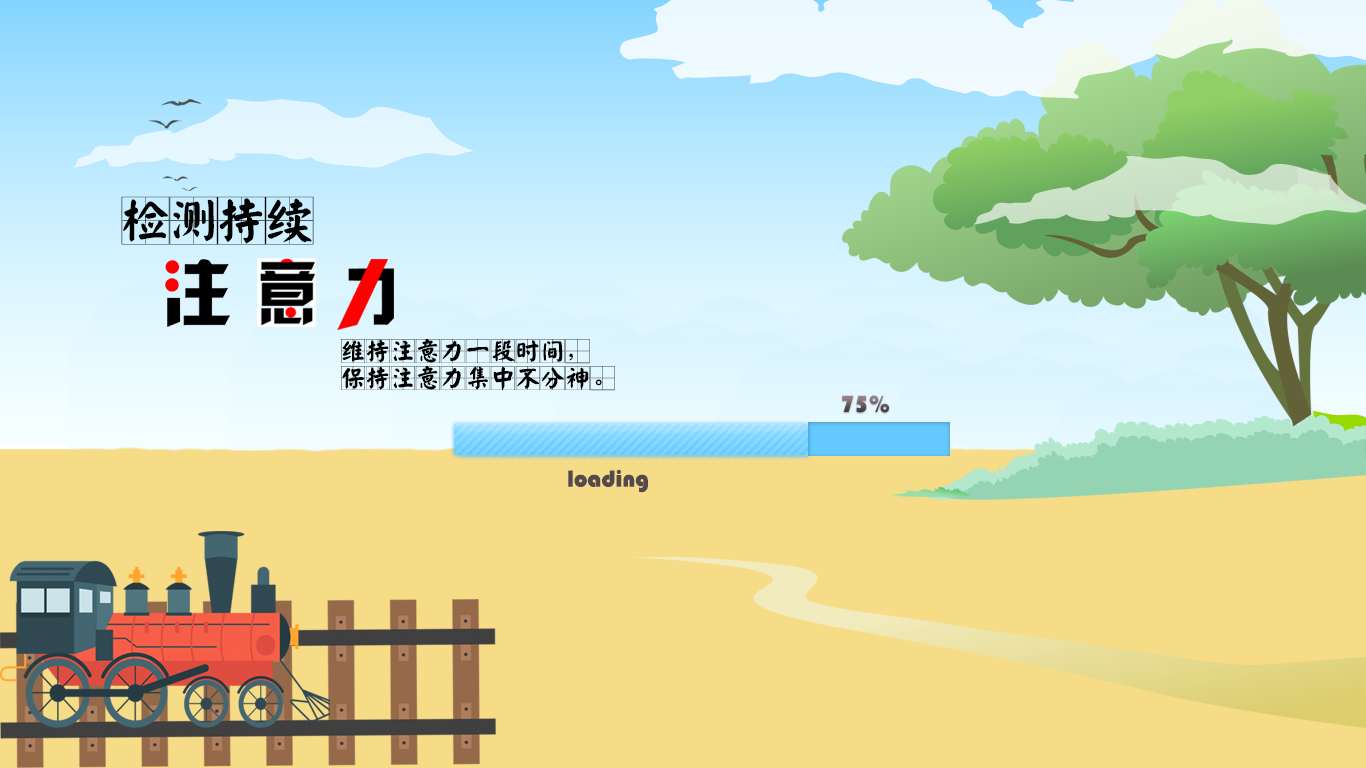
<style>
.page{position:relative;width:1366px;height:768px;background:#f7dc88}
.page>*{position:absolute;margin:0}
.t1{font:48px "YankaigungEG-Ultra-GB";color:#000000}
.t2{font:24px/14px "YankaigungEG-Ultra-GB";letter-spacing:0.04em;color:#000000}
.t3{font:24px "STHupo"}
.t4{font:24px "STHupo";color:#54494c}
</style>
<div class="page">
<p class="t1" style="left:121px;top:196px;width:193px;height:49px">检测持续</p>
<p class="t2" style="left:341px;top:339px;width:274px;height:52px">维持注意力一段时间，<br>保持注意力集中不分神。</p>
<p class="t3" style="left:842px;top:395px;width:47px;height:18px">75%</p>
<p class="t4" style="left:568px;top:469px;width:80px;height:24px">loading</p>
</div>
